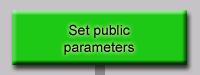
<style>
.page{position:relative;width:200px;height:75px;background:#1ec915}
.page>*{position:absolute;margin:0}
.t1{font:14px "ArialMT";color:#000000}
</style>
<div class="page">
<p class="t1" style="left:64px;top:24px;width:70px;height:31px;text-align:center">Set public<br>parameters</p>
</div>
